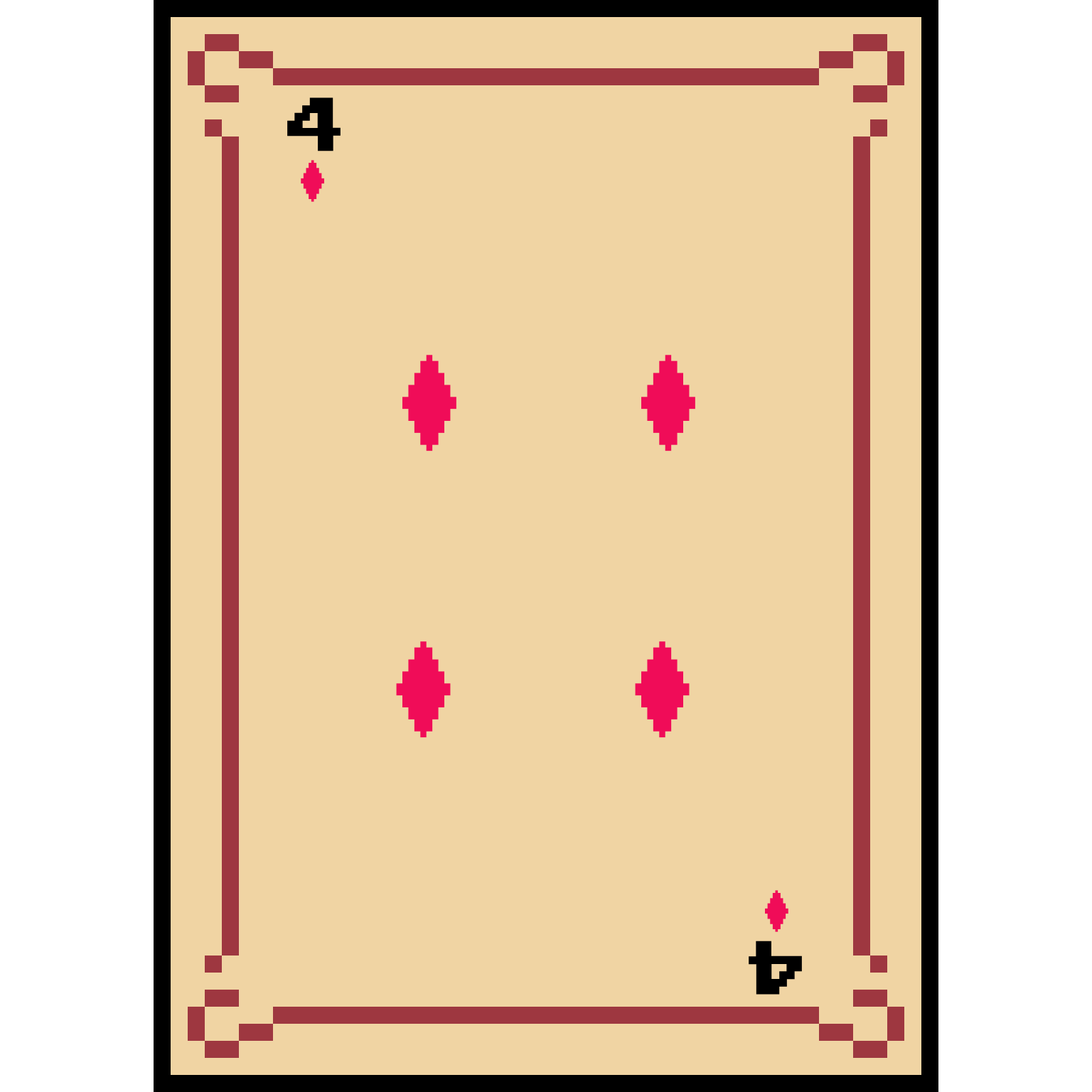
<style>
.page{position:relative;width:1092px;height:1092px;background:#f0d4a3}
.page>*{position:absolute;margin:0}
.t1{font:106.6px "ArcadeClassic";color:#000000}
</style>
<div class="page">
<p class="t1" style="left:287px;top:97px;width:54px;height:54px">4</p>
<p class="t1" style="left:749px;top:941px;width:53px;height:54px;rotate:180deg">4</p>
</div>
